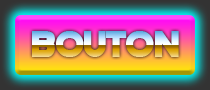
<style>
.page{position:relative;width:210px;height:90px}
.page>*{position:absolute;margin:0}
.t1{font:36px "DeathStar"}
</style>
<div class="page">
<p class="t1" style="left:32px;top:31px;width:147px;height:26px">BOUTON</p>
</div>
